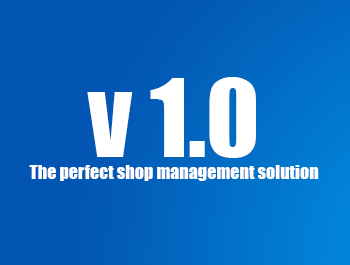
<style>
.page{position:relative;width:350px;height:265px;background:#0255b3}
.page>*{position:absolute;margin:0}
.t1{font:18px "Impact";color:#ffffff}
.t2{font:100px "Impact";color:#ffffff}
</style>
<div class="page">
<p class="t1" style="left:29px;top:77px;width:290px;height:104px;text-align:center"><span class="t2">v 1.0<br></span>The perfect shop management solution</p>
</div>
